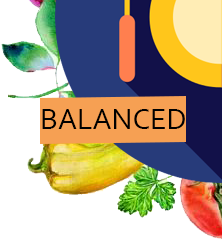
<style>
.page{position:relative;width:222px;height:241px;background:#ffffff}
.page>*{position:absolute;margin:0}
.t1{font:30px "Corbel";color:#000000}
</style>
<div class="page">
<p class="t1" style="left:42px;top:109px;width:143px;height:20px">BALANCED</p>
</div>
